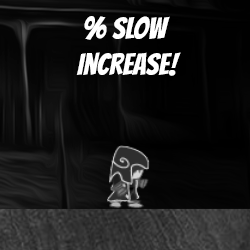
<style>
.page{position:relative;width:250px;height:250px}
.page>*{position:absolute;margin:0}
.t1{font:30px "Bangers-Regular";color:#ffffff}
</style>
<div class="page">
<p class="t1" style="left:76px;top:16px;width:105px;height:60px;text-align:center">% Slow <br>increase!</p>
</div>
